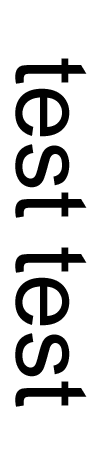
<style>
.page{position:relative;width:100px;height:460px;background:#ffffff}
.page>*{position:absolute;margin:0}
.t1{font:100px "ArialMT";color:#000000}
</style>
<div class="page">
<p class="t1" style="left:15px;top:58px;width:72px;height:349px;rotate:90deg">test test test</p>
</div>
